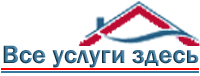
<style>
.page{position:relative;width:200px;height:76px;background:#ffffff}
.page>*{position:absolute;margin:0}
.t1{font:19.4px "FranklinGothic-Demi"}
</style>
<div class="page">
<p class="t1" style="left:3px;top:45px;width:196px;height:23px">Все услуги здесь</p>
</div>
